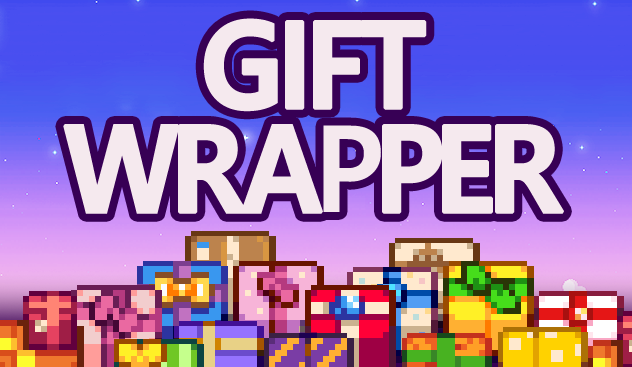
<style>
.page{position:relative;width:632px;height:367px}
.page>*{position:absolute;margin:0}
.t1{font:120px "MalgunGothicBold";letter-spacing:-0.06em;color:#f5e9ee;text-transform:uppercase;font-weight:bold;scale:0.95 1}
.t2{font:120px "MalgunGothicBold";letter-spacing:-0.075em;color:#f5e9ee;text-transform:uppercase;font-weight:bold;scale:0.95 1}
</style>
<div class="page">
<p class="t1" style="left:203px;top:18px;width:224px;height:94px">GIFT</p>
<p class="t2" style="left:63px;top:124px;width:501px;height:90px">WRAPPER</p>
</div>
